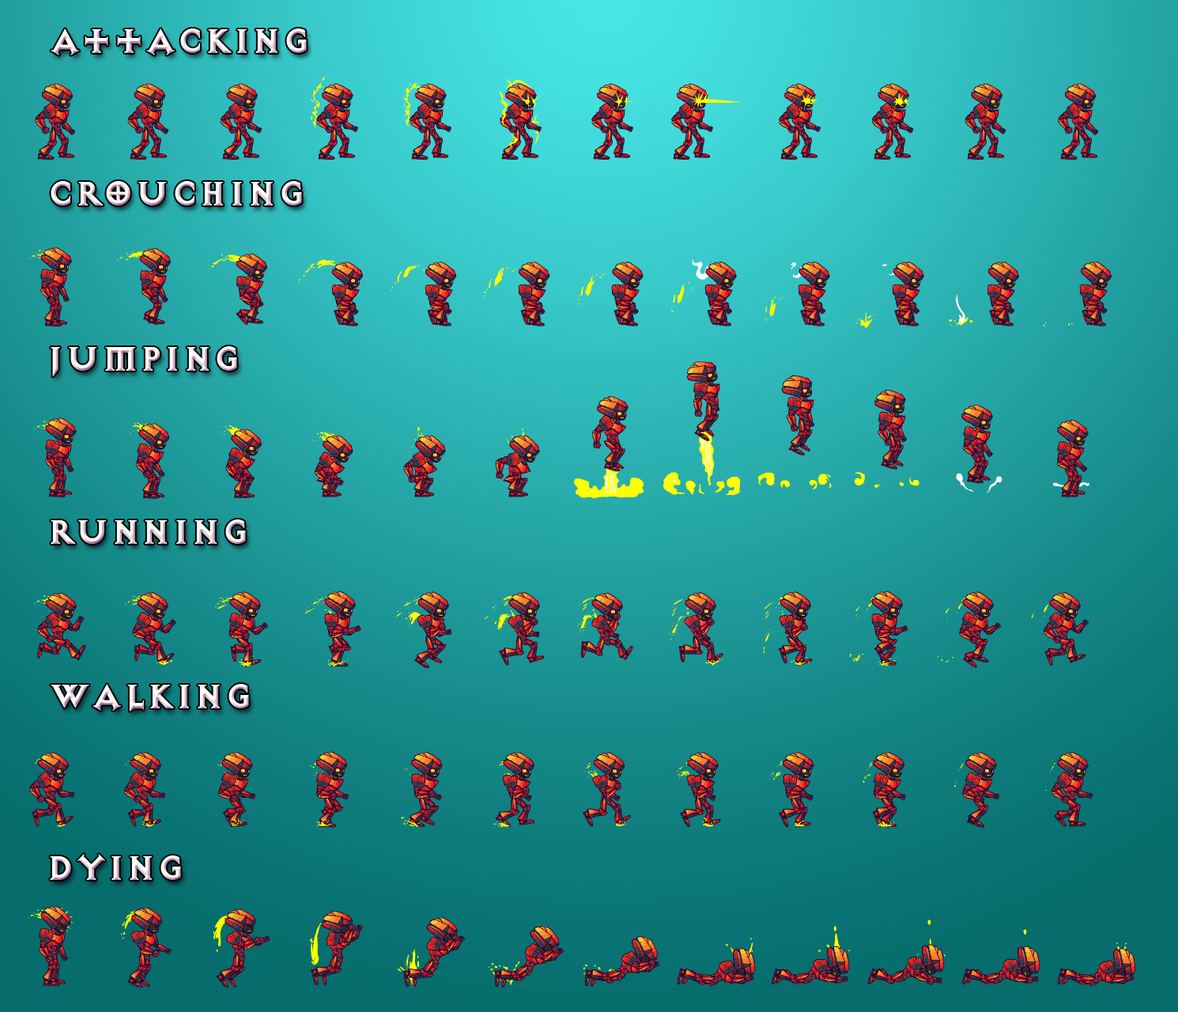
<style>
.page{position:relative;width:1178px;height:1012px}
.page>*{position:absolute;margin:0}
.t1{font:39px "DiabloHeavy"}
.t2{font:39px "DiabloHeavy";color:#fffef7}
</style>
<div class="page">
<p class="t1" style="left:51px;top:28px;width:256px;height:27px">attacking</p>
<p class="t1" style="left:51px;top:181px;width:251px;height:25px">Crouching</p>
<p class="t1" style="left:51px;top:346px;width:186px;height:31px">jumping</p>
<p class="t1" style="left:51px;top:519px;width:195px;height:25px">running</p>
<p class="t2" style="left:51px;top:684px;width:198px;height:28px">Walking</p>
<p class="t1" style="left:50px;top:854px;width:131px;height:26px">Dying</p>
</div>
